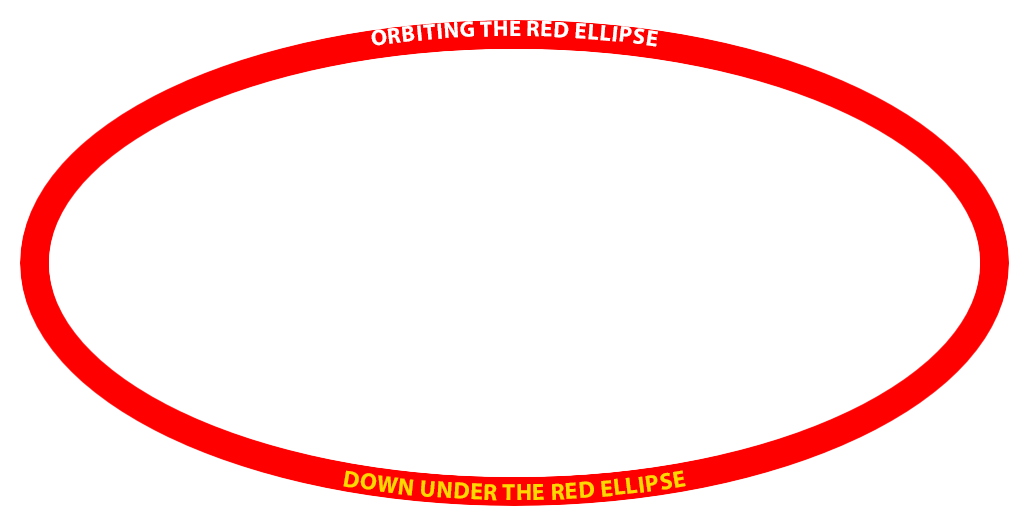
<style>
.page{position:relative;width:1029px;height:526px;background:#ffffff}
.page>*{position:absolute;margin:0}
.t1{font:22.5px "MyriadPro-Bold";letter-spacing:0.01em;color:#ffffff;text-transform:uppercase}
.t2{font:23.5px "MyriadPro-Bold";letter-spacing:0.01em;color:#ffd801;text-transform:uppercase}
</style>
<div class="page">
<p class="t1" style="left:371px;top:20px;width:287px;height:27px">Orbiting the red ellipse</p>
<p class="t2" style="left:343px;top:470px;width:343px;height:31px">Down under the red ellipse</p>
</div>
